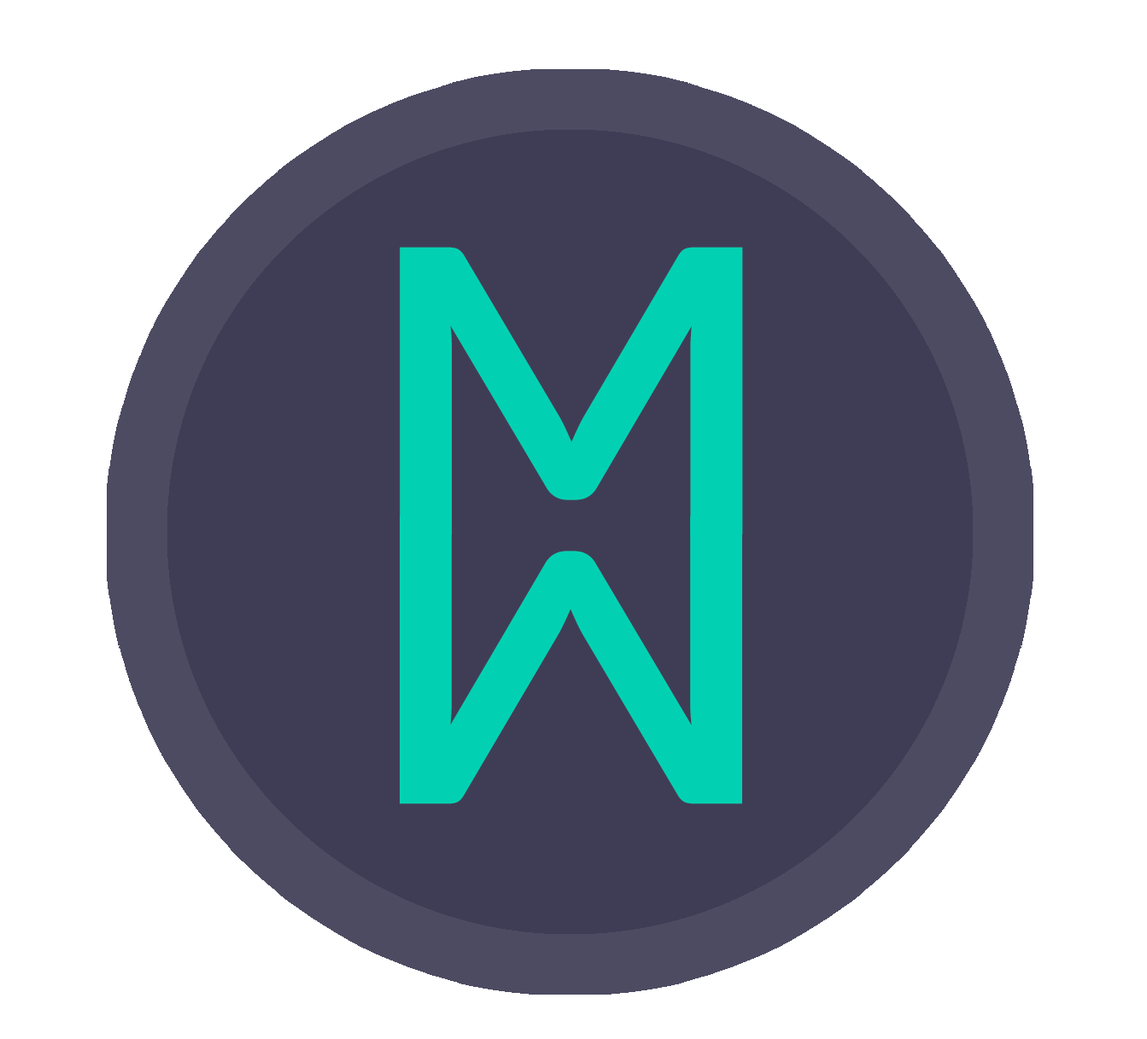
<style>
.page{position:relative;width:1147px;height:1039px;background:#ffffff}
.page>*{position:absolute;margin:0}
.t1{font:397px "Lato-Bold";letter-spacing:0.06em;color:#01d1b2;scale:1.1 1}
</style>
<div class="page">
<p class="t1" style="left:400px;top:247px;width:343px;height:288px">M</p>
<p class="t1" style="left:400px;top:517px;width:342px;height:288px;rotate:180deg">M</p>
</div>
